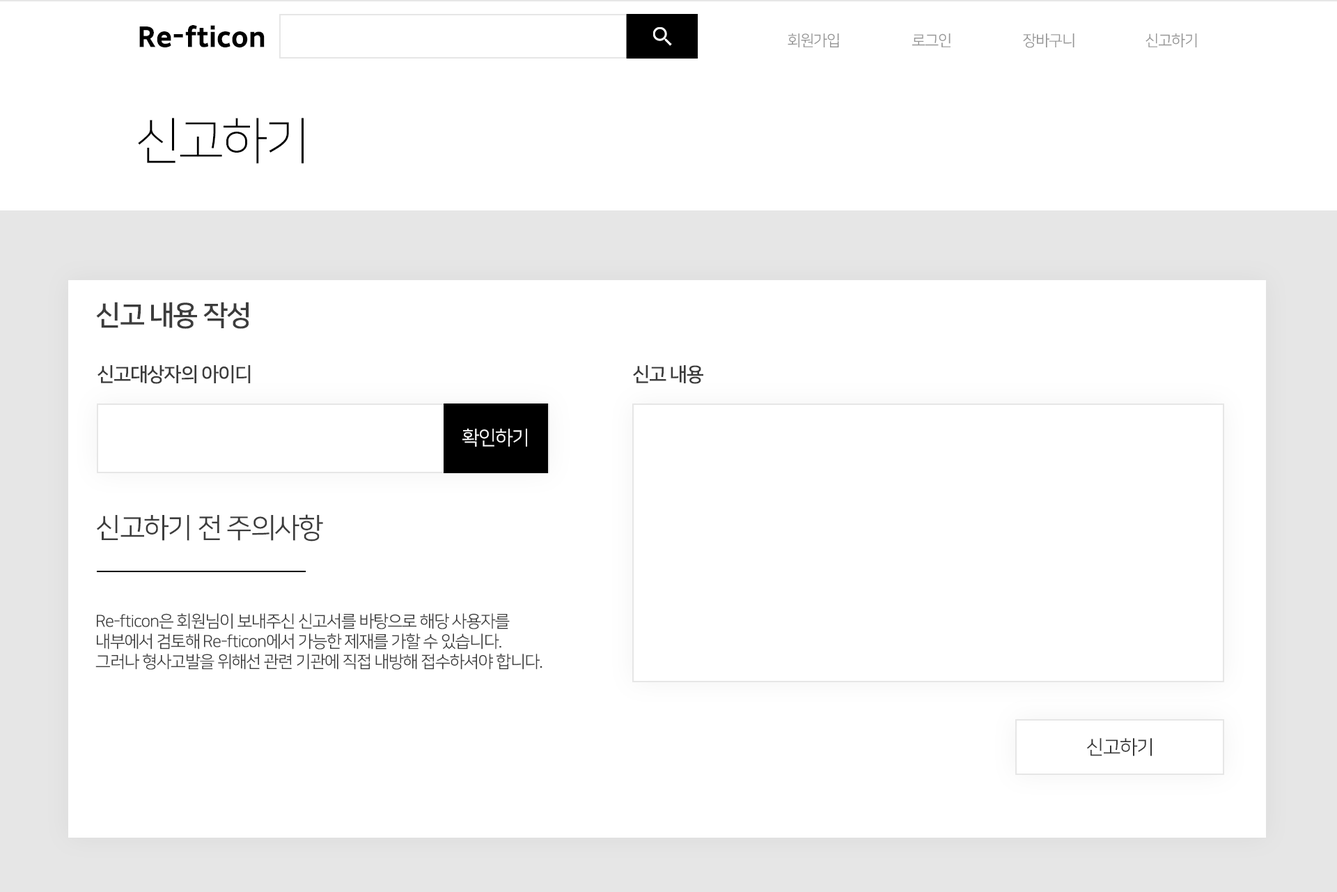
<style>
.page{position:relative;width:1337px;height:892px;background:#ffffff}
.page>*{position:absolute;margin:0}
.t1{font:27.9px "SDGothicNeoc-gExBd";color:#000000}
.t2{font:15.3px "NanumSquareOTFR";letter-spacing:-0.05em;color:#959595}
.t3{font:50.2px "NanumSquareOTFL";letter-spacing:-0.05em;color:#000000}
.t4{font:27.9px "NanumSquareOTFB";letter-spacing:-0.05em;color:#3c3c3c}
.t5{font:19.5px "NanumSquareOTFB";letter-spacing:-0.05em;color:#3b3b3b}
.t6{font:19.5px "NanumSquareOTFR";letter-spacing:-0.05em;color:#ffffff}
.t7{font:27.9px "NanumSquareOTFR";letter-spacing:-0.05em;color:#3c3c3c}
.t8{font:16.7px "NanumSquareOTFR";letter-spacing:-0.05em;color:#3c3c3c}
.t9{font:19.5px "NanumSquareOTFR";letter-spacing:-0.05em;color:#353535}
</style>
<div class="page">
<p class="t1" style="left:139px;top:25px;width:126px;height:23px">Re-fticon</p>
<p class="t2" style="left:788px;top:33px;width:51px;height:14px">회원가입</p>
<p class="t2" style="left:912px;top:33px;width:39px;height:14px">로그인</p>
<p class="t2" style="left:1023px;top:33px;width:52px;height:15px">장바구니</p>
<p class="t2" style="left:1146px;top:33px;width:51px;height:14px">신고하기</p>
<p class="t3" style="left:138px;top:118px;width:166px;height:46px">신고하기</p>
<p class="t4" style="left:96px;top:302px;width:153px;height:27px">신고 내용 작성</p>
<p class="t5" style="left:98px;top:365px;width:153px;height:19px">신고대상자의 아이디</p>
<p class="t5" style="left:633px;top:365px;width:71px;height:19px">신고 내용</p>
<p class="t6" style="left:463px;top:428px;width:64px;height:18px">확인하기</p>
<p class="t7" style="left:97px;top:514px;width:226px;height:27px">신고하기 전 주의사항</p>
<p class="t8" style="left:95px;top:613px;width:448px;height:56px">Re-fticon은 회원님이 보내주신 신고서를 바탕으로 해당 사용자를<br>내부에서 검토해 Re-fticon에서 가능한 제재를 가할 수 있습니다.<br>그러나 형사고발을 위해선 관련 기관에 직접 내방해 접수하셔야 합니다.</p>
<p class="t9" style="left:1087px;top:738px;width:65px;height:18px">신고하기</p>
</div>
